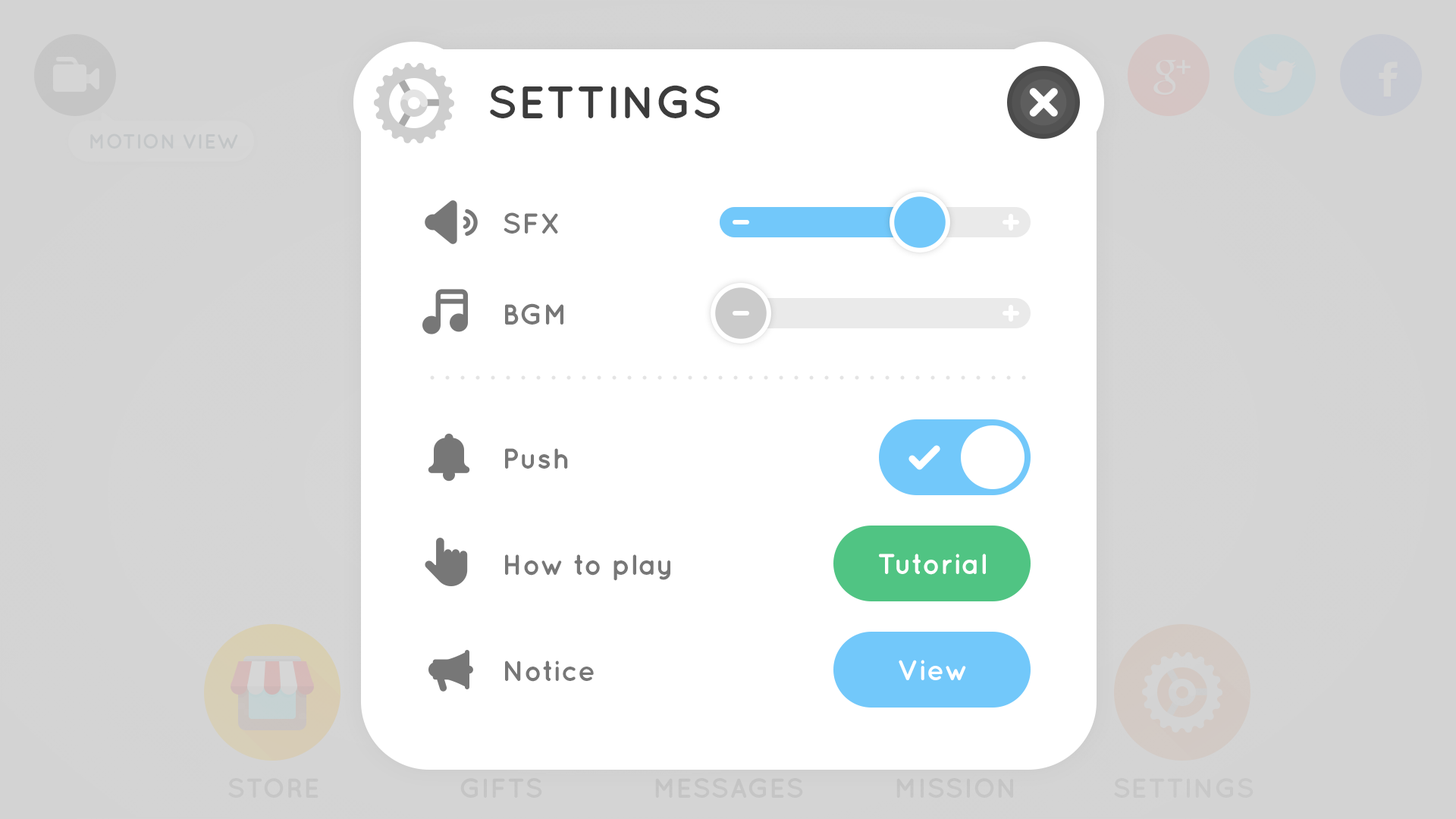
<style>
.page{position:relative;width:1456px;height:819px;background:#ffffff}
.page>*{position:absolute;margin:0}
.t1{font:45.5px "Quicksand-Bold";color:#3c3c3c;text-transform:uppercase}
.t2{font:28.8px/91px "Quicksand-Bold";color:#777777}
.t3{font:28.8px/106.2px "Quicksand-Bold";color:#777777}
.t4{font:28.8px "Quicksand-Bold";color:#ffffff}
</style>
<div class="page">
<p class="t1" style="left:490px;top:85px;width:230px;height:33px">Settings</p>
<p class="t2" style="left:504px;top:212px;width:59px;height:113px">SFX<br>BGM</p>
<p class="t3" style="left:505px;top:448px;width:165px;height:234px">Push<br>How to play<br>Notice</p>
<p class="t4" style="left:879px;top:554px;width:107px;height:21px">Tutorial</p>
<p class="t4" style="left:899px;top:660px;width:67px;height:20px">View</p>
</div>
